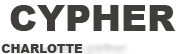
<style>
.page{position:relative;width:186px;height:54px;background:#ffffff}
.page>*{position:absolute;margin:0}
.t1{font:36px "Arial-Black";color:#403d3d}
.t2{font:12px "Arial-Black";color:#403d3d}
</style>
<div class="page">
<p class="t1" style="left:10px;top:5px;width:165px;height:26px">CYPHER</p>
<p class="t2" style="left:1px;top:44px;width:82px;height:9px">CHARLOTTE</p>
</div>
